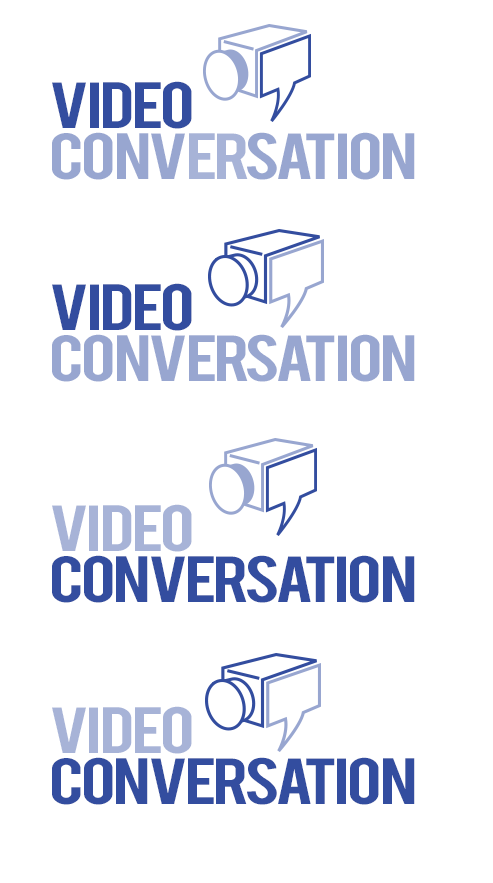
<style>
.page{position:relative;width:493px;height:883px;background:#ffffff}
.page>*{position:absolute;margin:0}
.t1{font:51.1px/2.7px "Bebas";letter-spacing:-0.06em;color:#98a6d0;scale:1.31 1}
.t2{font:51.1px/2.7px "Bebas";letter-spacing:-0.06em;color:#334d9f;scale:1.31 1}
.t3{font:51.1px/2.7px "Bebas";letter-spacing:-0.06em;color:#a7b3d7;scale:1.31 1}
</style>
<div class="page">
<p class="t1" style="left:52px;top:81px;width:363px;height:99px"><span class="t2">Video <br></span>Conv<span class="t3">er</span>sation</p>
<p class="t1" style="left:52px;top:283px;width:363px;height:99px"><span class="t2">Video <br></span>Conversation</p>
<p class="t2" style="left:52px;top:504px;width:363px;height:99px"><span class="t3">Video <br></span>Conversation</p>
<p class="t2" style="left:52px;top:706px;width:363px;height:99px"><span class="t3">Video <br></span>Conversation</p>
</div>
